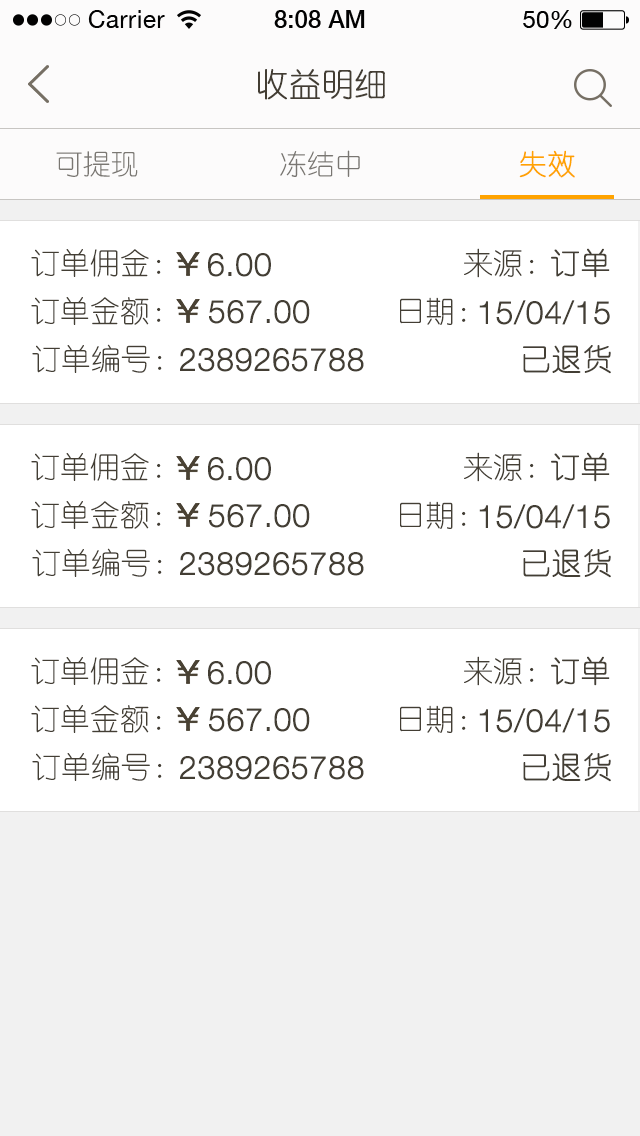
<style>
.page{position:relative;width:640px;height:1136px;background:#ffffff}
.page>*{position:absolute;margin:0}
.t1{font:32px "YouYuan";color:#433d33;text-transform:uppercase;font-weight:bold}
.t2{font:28px "YouYuan";color:#797672;text-transform:uppercase}
.t3{font:28px "YouYuan";color:#ffa300;text-transform:uppercase;font-weight:bold}
.t4{font:28px "YouYuan";color:#7a7772;text-transform:uppercase}
.t5{font:30px "YouYuan";color:#433e34;text-transform:uppercase}
.t6{font:32px "HelveticaNeueLTPro-Lt";color:#433e34;text-transform:uppercase;font-weight:bold}
.t7{font:30px "YouYuan";color:#433e34;text-transform:uppercase;font-weight:bold}
</style>
<div class="page">
<p class="t1" style="left:258px;top:69px;width:127px;height:31px">收益明细</p>
<p class="t2" style="left:280px;top:150px;width:80px;height:27px">冻结中</p>
<p class="t3" style="left:519px;top:150px;width:56px;height:28px">失效</p>
<p class="t4" style="left:56px;top:151px;width:82px;height:26px">可提现</p>
<p class="t5" style="left:31px;top:249px;width:130px;height:28px">订单佣金：</p>
<p class="t6" style="left:208px;top:253px;width:63px;height:24px">6.00</p>
<p class="t5" style="left:464px;top:248px;width:70px;height:30px">来源：</p>
<p class="t7" style="left:551px;top:248px;width:59px;height:30px">订单</p>
<p class="t5" style="left:31px;top:297px;width:130px;height:28px">订单金额：</p>
<p class="t6" style="left:209px;top:300px;width:101px;height:24px">567.00</p>
<p class="t5" style="left:400px;top:297px;width:66px;height:28px">日期：</p>
<p class="t6" style="left:479px;top:300px;width:131px;height:25px">15/04/15</p>
<p class="t5" style="left:32px;top:344px;width:130px;height:29px">订单编号：</p>
<p class="t6" style="left:180px;top:348px;width:184px;height:24px">2389265788</p>
<p class="t7" style="left:523px;top:345px;width:88px;height:29px">已退货</p>
<p class="t5" style="left:31px;top:453px;width:130px;height:28px">订单佣金：</p>
<p class="t6" style="left:208px;top:457px;width:63px;height:24px">6.00</p>
<p class="t5" style="left:464px;top:452px;width:70px;height:30px">来源：</p>
<p class="t7" style="left:551px;top:452px;width:59px;height:30px">订单</p>
<p class="t5" style="left:31px;top:501px;width:130px;height:28px">订单金额：</p>
<p class="t6" style="left:209px;top:504px;width:101px;height:24px">567.00</p>
<p class="t5" style="left:400px;top:501px;width:66px;height:28px">日期：</p>
<p class="t6" style="left:479px;top:504px;width:131px;height:25px">15/04/15</p>
<p class="t5" style="left:32px;top:548px;width:130px;height:29px">订单编号：</p>
<p class="t6" style="left:180px;top:552px;width:184px;height:24px">2389265788</p>
<p class="t7" style="left:523px;top:549px;width:88px;height:29px">已退货</p>
<p class="t5" style="left:31px;top:657px;width:130px;height:28px">订单佣金：</p>
<p class="t6" style="left:208px;top:661px;width:63px;height:24px">6.00</p>
<p class="t5" style="left:464px;top:656px;width:70px;height:30px">来源：</p>
<p class="t7" style="left:551px;top:656px;width:59px;height:30px">订单</p>
<p class="t5" style="left:31px;top:705px;width:130px;height:28px">订单金额：</p>
<p class="t6" style="left:209px;top:708px;width:101px;height:24px">567.00</p>
<p class="t5" style="left:400px;top:705px;width:66px;height:28px">日期：</p>
<p class="t6" style="left:479px;top:708px;width:131px;height:25px">15/04/15</p>
<p class="t5" style="left:32px;top:752px;width:130px;height:29px">订单编号：</p>
<p class="t6" style="left:180px;top:756px;width:184px;height:24px">2389265788</p>
<p class="t7" style="left:523px;top:753px;width:88px;height:29px">已退货</p>
</div>
